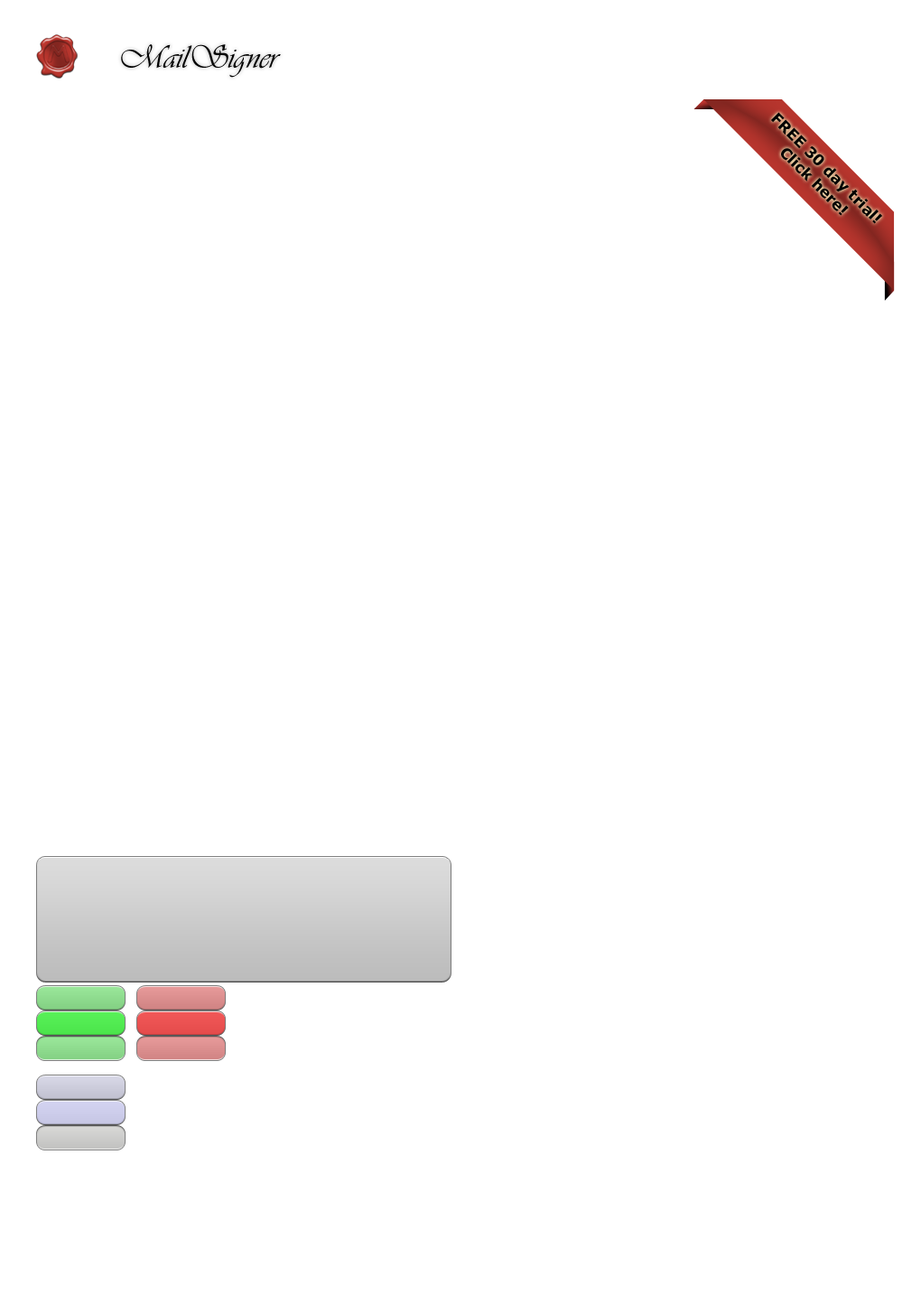
<style>
.page{position:relative;width:921px;height:1294px;background:#ffffff}
.page>*{position:absolute;margin:0}
.t1{font:33.4px "Vivaldii";color:#000000}
.t2{font:15px "Verdana-Bold";color:#000000}
</style>
<div class="page">
<p class="t1" style="left:121px;top:44px;width:160px;height:34px">MailSigner</p>
<p class="t2" style="left:771px;top:112px;width:111px;height:112px;text-align:center;rotate:45deg">FREE 30 day trial!<br>Click here!</p>
</div>
